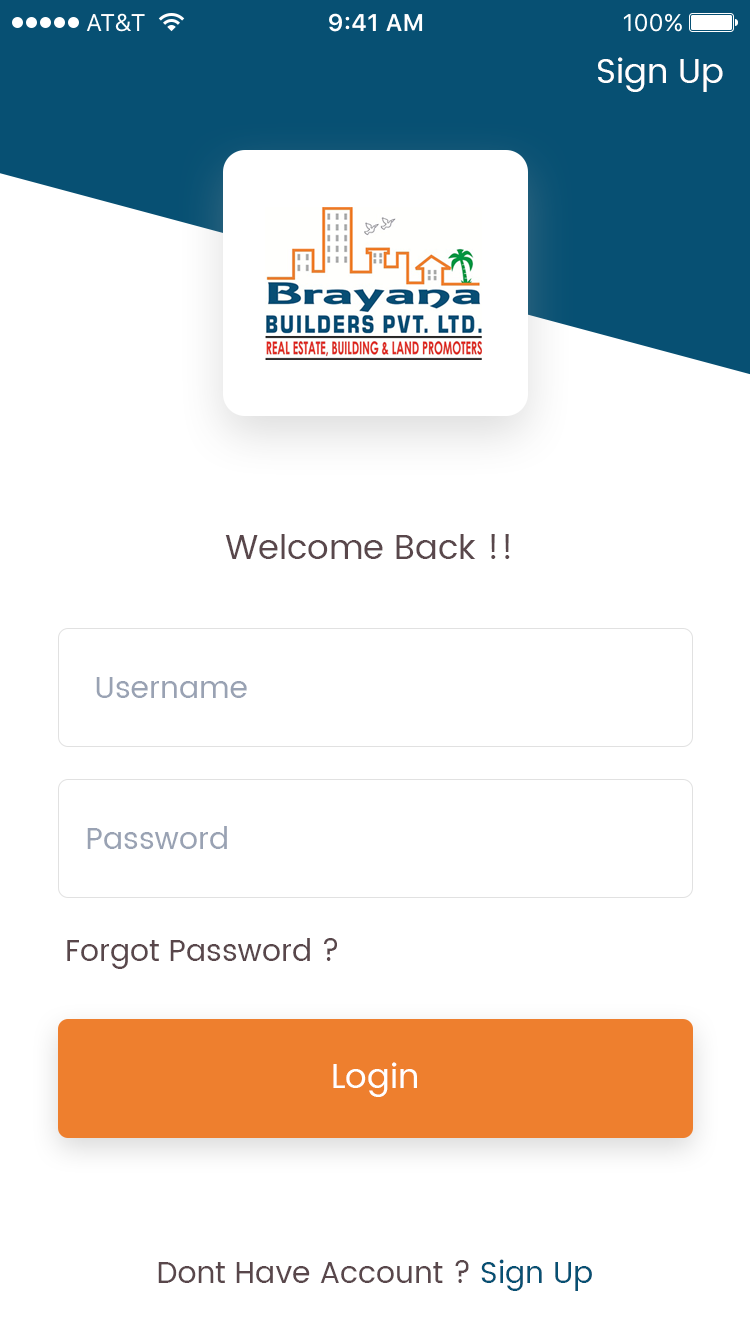
<style>
.page{position:relative;width:750px;height:1334px;background:#ffffff}
.page>*{position:absolute;margin:0}
.t1{font:34px "Poppins-Regular";color:#ffffff}
.t2{font:34px "Poppins-Regular";color:#59474b}
.t3{font:30px "Poppins-Regular";color:#99a2b3}
.t4{font:30px "Poppins-Regular";color:#59474b}
.t5{font:30px "Poppins-Regular";color:#075073}
</style>
<div class="page">
<p class="t1" style="left:598px;top:57px;width:125px;height:35px">Sign Up</p>
<p class="t2" style="left:225px;top:534px;width:285px;height:25px">Welcome Back !!</p>
<p class="t3" style="left:96px;top:677px;width:151px;height:21px">Username</p>
<p class="t3" style="left:87px;top:826px;width:140px;height:23px">Password</p>
<p class="t4" style="left:67px;top:938px;width:270px;height:31px">Forgot Password ?</p>
<p class="t1" style="left:333px;top:1062px;width:84px;height:35px">Login</p>
<p class="t4" style="left:158px;top:1259px;width:434px;height:32px">Dont Have Account ? <span class="t5">Sign Up</span></p>
</div>
